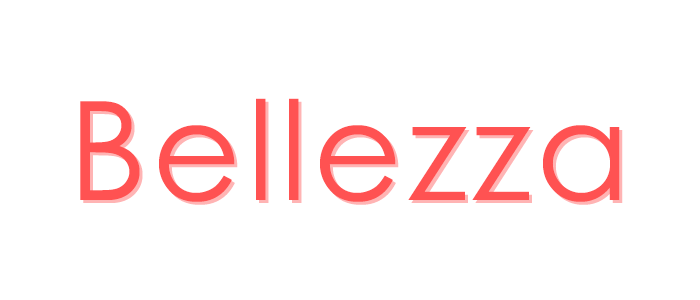
<style>
.page{position:relative;width:700px;height:300px;background:#ffffff}
.page>*{position:absolute;margin:0}
.t1{font:137.5px "CenturyGothic";letter-spacing:0.04em;color:#ff5252}
</style>
<div class="page">
<p class="t1" style="left:80px;top:98px;width:540px;height:104px">Bellezza</p>
<p class="t1" style="left:83px;top:101px;width:540px;height:104px;opacity:0.51">Bellezza</p>
</div>
